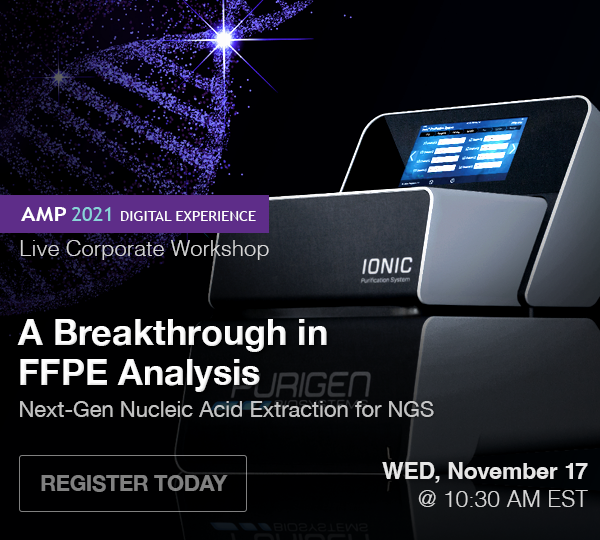
<style>
.page{position:relative;width:600px;height:540px}
.page>*{position:absolute;margin:0}
.t1{font:14.3px "TrebuchetMS";letter-spacing:0.01em;color:#ffffff;text-transform:uppercase;scale:1.03 1}
.t2{font:19.6px "TrebuchetMS-Bold";letter-spacing:0.01em;color:#ffffff;scale:1.19 1}
.t3{font:19.6px "TrebuchetMS";color:#89d4d8;scale:1.03 1}
.t4{font:22px "Helvetica-Light";color:#d5d4d5}
.t5{font:36px/40px "HelveticaNeue-Bold";color:#fefefe}
.t6{font:22px "HelveticaNeue";color:#c2c2c2}
.t7{font:22.9px "Helvetica-Bold";color:#e6e6e6}
.t8{font:21.6px "HelveticaNeue-Bold";letter-spacing:-0.01em;color:#7c868c;text-transform:uppercase}
.t9{font:22.9px "Helvetica-Light";color:#d5d5d5}
</style>
<div class="page">
<p class="t1" style="left:21px;top:207px;width:235px;height:14px"><span class="t2">AMP </span><span class="t3">2021 </span>Digital Experience</p>
<p class="t4" style="left:20px;top:240px;width:249px;height:20px">Live Corporate Workshop</p>
<p class="t5" style="left:17px;top:319px;width:310px;height:73px">A Breakthrough in<br>FFPE Analysis</p>
<p class="t6" style="left:20px;top:401px;width:414px;height:16px">Next-Gen Nucleic Acid Extraction for NGS</p>
<p class="t7" style="left:382px;top:462px;width:206px;height:21px">WED, November 17</p>
<p class="t8" style="left:41px;top:475px;width:187px;height:17px">Register Today</p>
<p class="t9" style="left:418px;top:490px;width:170px;height:17px">@ 10:30 AM EST</p>
</div>
